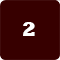
<style>
.page{position:relative;width:60px;height:60px;background:#370000}
.page>*{position:absolute;margin:0}
.t1{font:20.8px "Rockwell-ExtraBold";color:#ffffff}
</style>
<div class="page">
<p class="t1" style="left:23px;top:22px;width:12px;height:14px">2</p>
</div>
